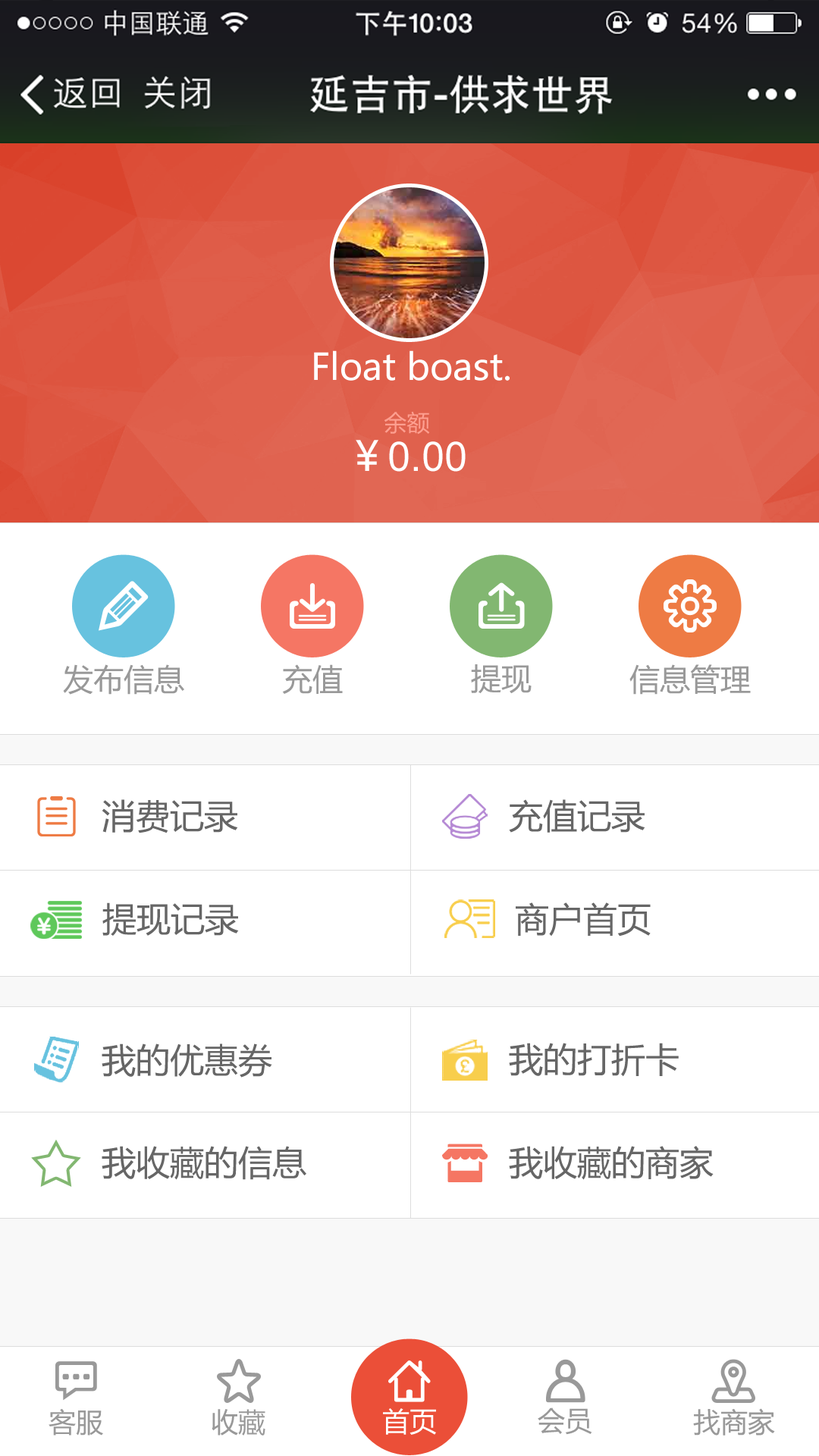
<style>
.page{position:relative;width:819px;height:1456px;background:#ffffff}
.page>*{position:absolute;margin:0}
.t1{font:36.4px "MicrosoftYaHei";color:#ffffff}
.t2{font:40.9px/34.1px "ArialMT";color:#ffffff}
.t3{font:22.7px/34.1px "MicrosoftYaHei";color:#fe9f90}
.t4{font:40.9px/34.1px "MicrosoftYaHei";color:#ffffff}
.t5{font:30.3px "MicrosoftYaHei";color:#999999}
.t6{font:34.1px "MicrosoftYaHei";color:#666666}
.t7{font:27.3px "MicrosoftYaHei";color:#999999}
.t8{font:27.3px "MicrosoftYaHei";color:#ffffff}
</style>
<div class="page">
<p class="t1" style="left:314px;top:350px;width:196px;height:31px">Float boast.</p>
<p class="t2" style="left:356px;top:411px;width:110px;height:61px;text-align:center"><span class="t3">余额<br></span><span class="t4">￥</span>0.00</p>
<p class="t5" style="left:63px;top:664px;width:121px;height:31px">发布信息</p>
<p class="t5" style="left:282px;top:664px;width:61px;height:30px">充值</p>
<p class="t5" style="left:471px;top:664px;width:61px;height:30px">提现</p>
<p class="t5" style="left:629px;top:664px;width:122px;height:31px">信息管理</p>
<p class="t6" style="left:102px;top:799px;width:136px;height:34px">消费记录</p>
<p class="t6" style="left:509px;top:799px;width:136px;height:34px">充值记录</p>
<p class="t6" style="left:102px;top:902px;width:137px;height:34px">提现记录</p>
<p class="t6" style="left:516px;top:902px;width:135px;height:35px">商户首页</p>
<p class="t6" style="left:102px;top:1043px;width:170px;height:35px">我的优惠券</p>
<p class="t6" style="left:509px;top:1043px;width:170px;height:34px">我的打折卡</p>
<p class="t6" style="left:102px;top:1146px;width:204px;height:34px">我收藏的信息</p>
<p class="t6" style="left:509px;top:1146px;width:205px;height:34px">我收藏的商家</p>
<p class="t7" style="left:49px;top:1408px;width:54px;height:28px">客服</p>
<p class="t7" style="left:212px;top:1409px;width:53px;height:27px">收藏</p>
<p class="t8" style="left:383px;top:1408px;width:53px;height:27px">首页</p>
<p class="t7" style="left:538px;top:1407px;width:54px;height:28px">会员</p>
<p class="t7" style="left:693px;top:1408px;width:82px;height:28px">找商家</p>
</div>
